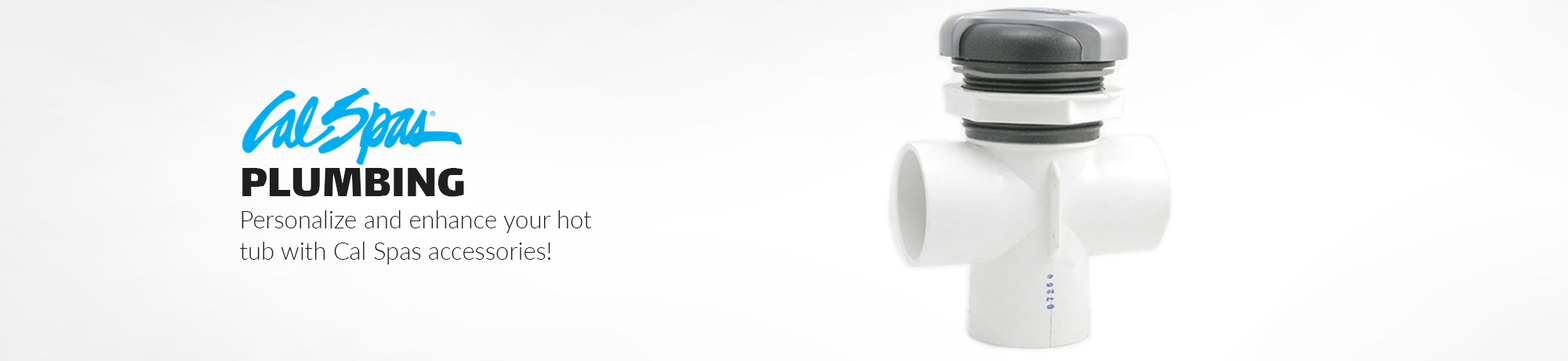
<style>
.page{position:relative;width:1568px;height:361px}
.page>*{position:absolute;margin:0}
.t1{font:49.6px "Lalezar-Regular";color:#1f1f1f}
.t2{font:24.3px/31.7px "Lato-Light";color:#1f1f1f}
</style>
<div class="page">
<p class="t1" style="left:242px;top:168px;width:222px;height:29px">PLUMBING</p>
<p class="t2" style="left:240px;top:210px;width:352px;height:54px">Personalize and enhance your hot <br>tub with Cal Spas accessories!</p>
</div>
